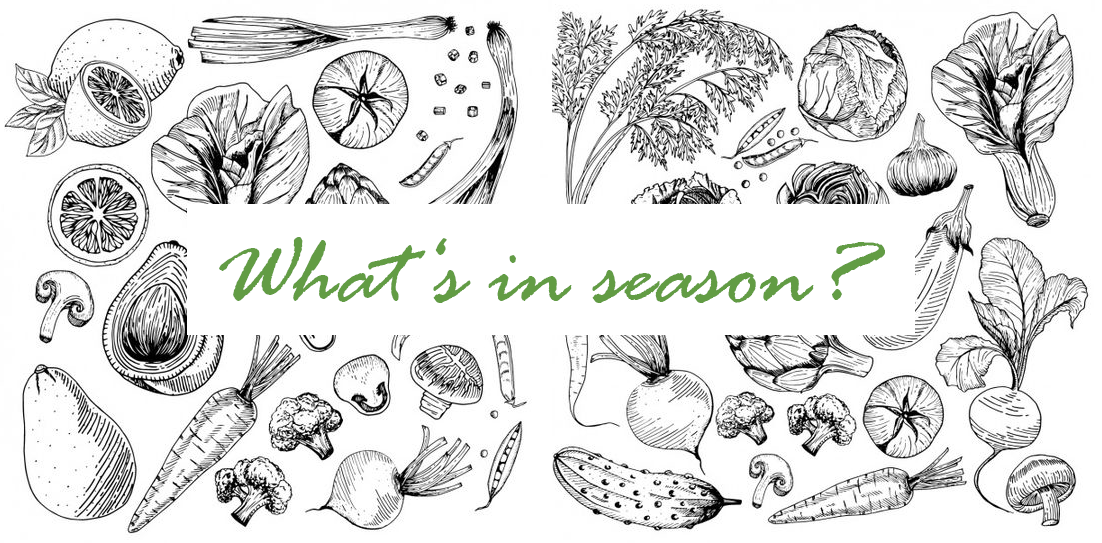
<style>
.page{position:relative;width:1102px;height:543px;background:#ffffff}
.page>*{position:absolute;margin:0}
.t1{font:100px "RageItalic";color:#629c44}
</style>
<div class="page">
<p class="t1" style="left:219px;top:237px;width:666px;height:66px">What‘s in season?</p>
</div>
